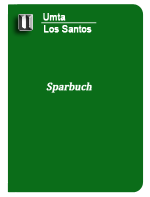
<style>
.page{position:relative;width:150px;height:197px;background:#0b6d19}
.page>*{position:absolute;margin:0}
.t1{font:9.1px "ArialMT";color:#ffffff;font-weight:bold}
.t2{font:10.7px "CambriaMath";color:#ffffff;font-weight:bold;font-style:italic}
</style>
<div class="page">
<p class="t1" style="left:43px;top:13px;width:23px;height:8px">Umta</p>
<p class="t1" style="left:44px;top:25px;width:48px;height:8px">Los Santos</p>
<p class="t2" style="left:46px;top:82px;width:46px;height:11px">Sparbuch</p>
</div>
